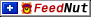
<style>
.page{position:relative;width:91px;height:17px;background:#ffffff}
.page>*{position:absolute;margin:0}
.t1{font:12px "HE_TERMINAL-Roman";color:#b90000;font-weight:bold;font-style:italic}
.t2{font:13px "HE_TERMINAL-Roman";color:#000000;font-weight:bold;font-style:italic}
</style>
<div class="page">
<p class="t1" style="left:34px;top:3px;width:54px;height:10px">Feed<span class="t2">Nut</span></p>
</div>
